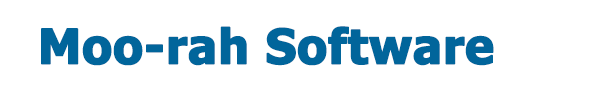
<style>
.page{position:relative;width:600px;height:100px;background:#ffffff}
.page>*{position:absolute;margin:0}
.t1{font:48px "Tahoma-Bold";color:#01659b;font-weight:bold}
</style>
<div class="page">
<p class="t1" style="left:41px;top:26px;width:453px;height:40px">Moo-rah Software</p>
</div>
